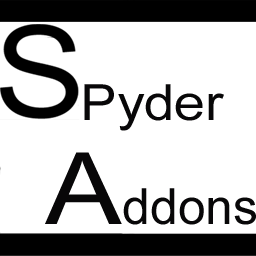
<style>
.page{position:relative;width:256px;height:256px;background:#ffffff}
.page>*{position:absolute;margin:0}
.t1{font:50px "ArialMT";color:#080708;scale:1.1 1}
.t2{font:99.8px "ArialMT";color:#080708;scale:1.15 1}
.t3{font:50px "ArialMT";color:#080708}
</style>
<div class="page">
<p class="t1" style="left:84px;top:84px;width:140px;height:47px">Pyder</p>
<p class="t2" style="left:45px;top:152px;width:77px;height:72px">A</p>
<p class="t3" style="left:123px;top:188px;width:133px;height:37px">ddons</p>
</div>
